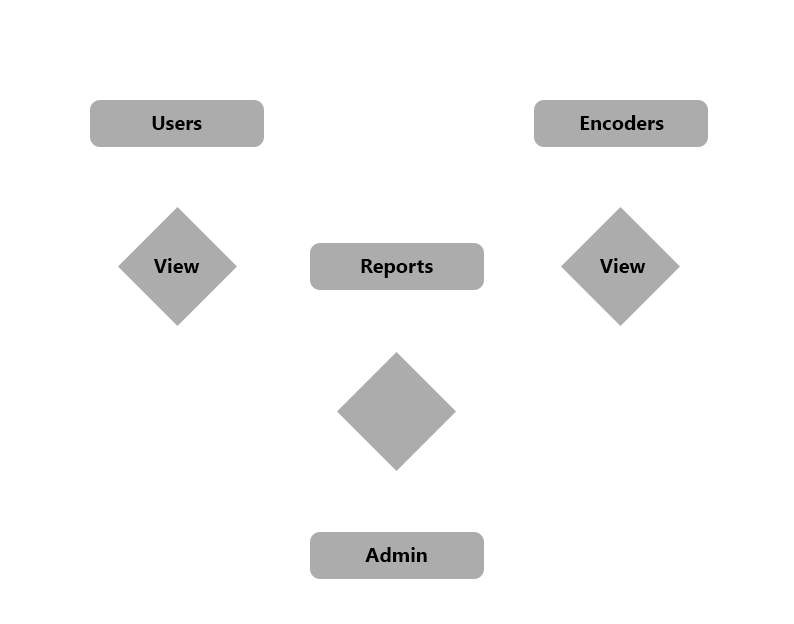
<style>
.page{position:relative;width:794px;height:624px;background:#ffffff}
.page>*{position:absolute;margin:0}
.t1{font:20px "SegoeUI-Bold";color:#000000}
</style>
<div class="page">
<p class="t1" style="left:152px;top:116px;width:50px;height:14px">Users</p>
<p class="t1" style="left:580px;top:115px;width:84px;height:15px">Encoders</p>
<p class="t1" style="left:153px;top:258px;width:47px;height:15px">View</p>
<p class="t1" style="left:361px;top:259px;width:72px;height:19px">Reports</p>
<p class="t1" style="left:599px;top:258px;width:47px;height:15px">View</p>
<p class="t1" style="left:365px;top:547px;width:62px;height:15px">Admin</p>
</div>
